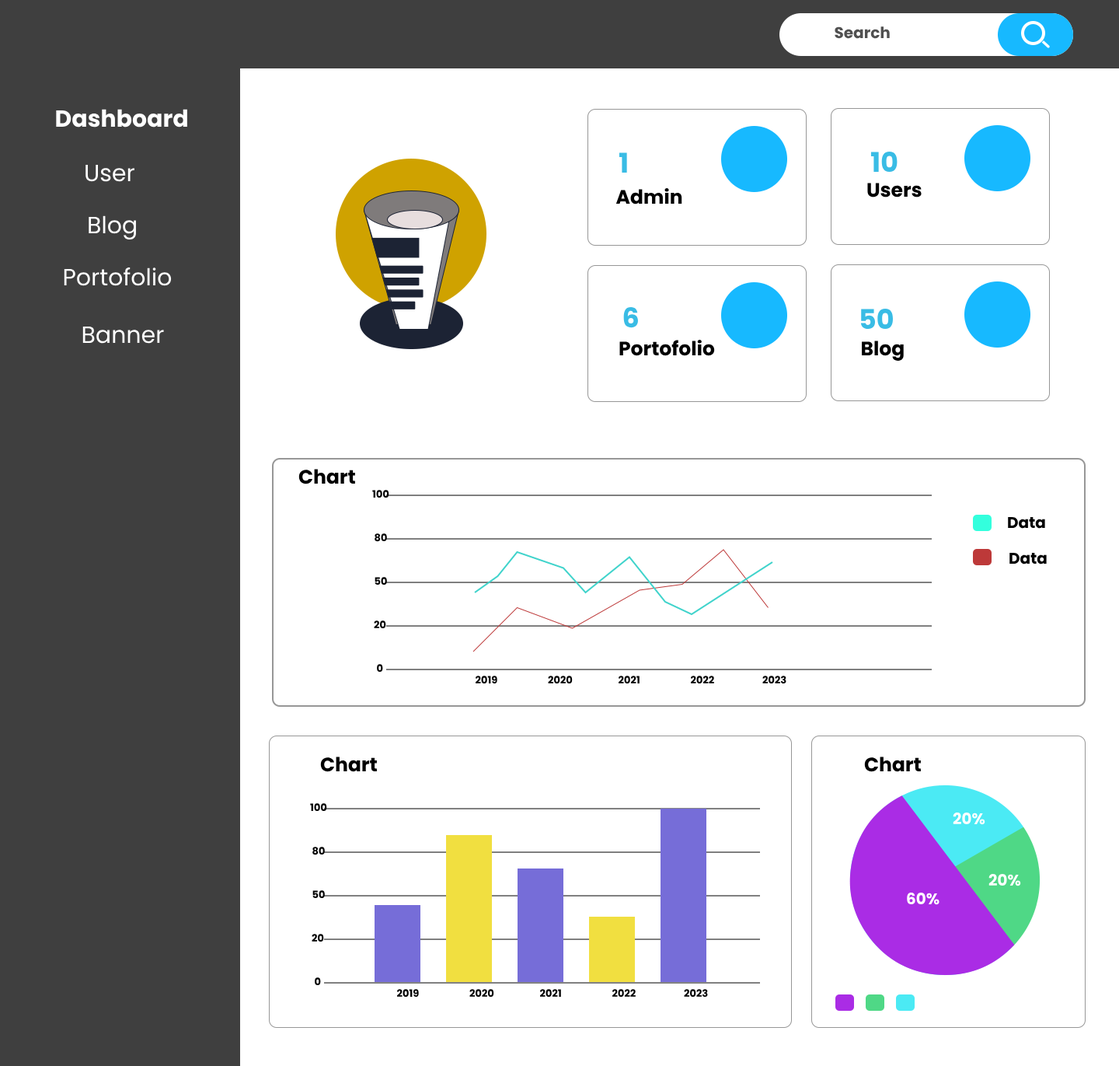
<style>
.page{position:relative;width:1119px;height:1066px;background:#ffffff}
.page>*{position:absolute;margin:0}
.t1{font:15.5px "Poppins-Bold";color:#505050}
.t2{font:23.3px "Poppins-Bold";color:#ffffff}
.t3{font:27.2px "Poppins-Bold";color:#39bce5}
.t4{font:23.3px "Poppins-Regular";color:#ffffff}
.t5{font:19.4px "Poppins-Bold";color:#000000}
.t6{font:10.1px "Poppins-Bold";color:#000000}
.t7{font:15.5px "Poppins-Bold";color:#000000}
.t8{font:15.5px "Poppins-Bold";color:#ffffff}
</style>
<div class="page">
<p class="t1" style="left:835px;top:26px;width:55px;height:13px">Search</p>
<p class="t2" style="left:56px;top:109px;width:131px;height:18px">Dashboard</p>
<p class="t3" style="left:619px;top:152px;width:8px;height:21px">1</p>
<p class="t3" style="left:870px;top:151px;width:28px;height:21px">10</p>
<p class="t4" style="left:85px;top:165px;width:49px;height:17px">User</p>
<p class="t5" style="left:867px;top:183px;width:55px;height:14px">Users</p>
<p class="t5" style="left:616px;top:187px;width:66px;height:17px">Admin</p>
<p class="t4" style="left:89px;top:215px;width:47px;height:25px">Blog</p>
<p class="t4" style="left:64px;top:267px;width:108px;height:19px">Portofolio</p>
<p class="t3" style="left:623px;top:306px;width:15px;height:22px">6</p>
<p class="t3" style="left:860px;top:308px;width:33px;height:21px">50</p>
<p class="t4" style="left:82px;top:326px;width:82px;height:18px">Banner</p>
<p class="t5" style="left:619px;top:339px;width:96px;height:17px">Portofolio</p>
<p class="t5" style="left:862px;top:340px;width:42px;height:21px">Blog</p>
<p class="t5" style="left:298px;top:469px;width:57px;height:15px">Chart</p>
<p class="t6" style="left:372px;top:490px;width:17px;height:7px">100</p>
<p class="t7" style="left:1008px;top:516px;width:37px;height:12px">Data</p>
<p class="t6" style="left:375px;top:533px;width:12px;height:9px">80</p>
<p class="t7" style="left:1010px;top:552px;width:37px;height:12px">Data</p>
<p class="t6" style="left:375px;top:577px;width:12px;height:7px">50</p>
<p class="t6" style="left:374px;top:620px;width:12px;height:8px">20</p>
<p class="t6" style="left:377px;top:664px;width:6px;height:7px">0</p>
<p class="t6" style="left:475px;top:675px;width:22px;height:9px">2019</p>
<p class="t6" style="left:548px;top:675px;width:25px;height:8px">2020</p>
<p class="t6" style="left:618px;top:675px;width:22px;height:8px">2021</p>
<p class="t6" style="left:690px;top:675px;width:24px;height:8px">2022</p>
<p class="t6" style="left:762px;top:675px;width:24px;height:9px">2023</p>
<p class="t5" style="left:320px;top:756px;width:57px;height:16px">Chart</p>
<p class="t5" style="left:864px;top:756px;width:57px;height:16px">Chart</p>
<p class="t6" style="left:310px;top:803px;width:17px;height:8px">100</p>
<p class="t8" style="left:953px;top:812px;width:32px;height:13px">20%</p>
<p class="t6" style="left:312px;top:846px;width:13px;height:9px">80</p>
<p class="t8" style="left:989px;top:874px;width:32px;height:12px">20%</p>
<p class="t6" style="left:312px;top:890px;width:13px;height:8px">50</p>
<p class="t8" style="left:907px;top:892px;width:33px;height:13px">60%</p>
<p class="t6" style="left:312px;top:933px;width:12px;height:8px">20</p>
<p class="t6" style="left:315px;top:977px;width:6px;height:8px">0</p>
<p class="t6" style="left:396px;top:989px;width:23px;height:8px">2019</p>
<p class="t6" style="left:469px;top:989px;width:25px;height:7px">2020</p>
<p class="t6" style="left:539px;top:989px;width:22px;height:7px">2021</p>
<p class="t6" style="left:612px;top:989px;width:24px;height:7px">2022</p>
<p class="t6" style="left:684px;top:989px;width:24px;height:8px">2023</p>
</div>
